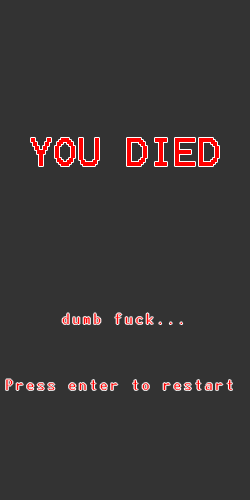
<style>
.page{position:relative;width:250px;height:500px;background:#333333}
.page>*{position:absolute;margin:0}
.t1{font:32px "Terminal";color:#ff0000}
.t2{font:14px "Terminal";color:#ff0000}
</style>
<div class="page">
<p class="t1" style="left:31px;top:138px;width:188px;height:28px">YOU DIED</p>
<p class="t2" style="left:62px;top:313px;width:121px;height:11px">dumb fuck...</p>
<p class="t2" style="left:6px;top:379px;width:226px;height:11px">Press enter to restart</p>
</div>
